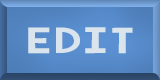
<style>
.page{position:relative;width:160px;height:80px}
.page>*{position:absolute;margin:0}
.t1{font:29.2px "KGBlankSpaceSolid";letter-spacing:0.1em;color:#d9e4ed;scale:1.37 1}
</style>
<div class="page">
<p class="t1" style="left:28px;top:27px;width:105px;height:27px">EDIT</p>
</div>
